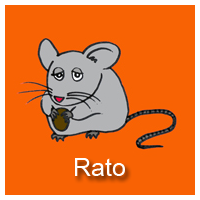
<style>
.page{position:relative;width:200px;height:200px;background:#f86204}
.page>*{position:absolute;margin:0}
.t1{font:25px "ArialMT";color:#ffffff}
</style>
<div class="page">
<p class="t1" style="left:75px;top:158px;width:50px;height:18px">Rato</p>
</div>
